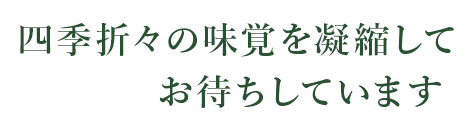
<style>
.page{position:relative;width:473px;height:127px;background:#ffffff}
.page>*{position:absolute;margin:0}
.t1{font:36px/52px "YuMin-Demibold";letter-spacing:0.1em;color:#295233}
</style>
<div class="page">
<p class="t1" style="left:20px;top:22px;width:434px;height:86px;text-align:right">四季折々の味覚を凝縮して<br>お待ちしています</p>
</div>
